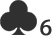
<style>
.page{position:relative;width:55px;height:36px;background:#ffffff}
.page>*{position:absolute;margin:0}
.t1{font:23.4px "MyriadPro-Regular";letter-spacing:-0.1em;color:#303030;font-weight:bold}
</style>
<div class="page">
<p class="t1" style="left:40px;top:19px;width:12px;height:17px">6</p>
</div>
